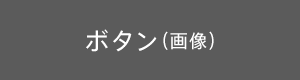
<style>
.page{position:relative;width:300px;height:80px;background:#5b5b5b}
.page>*{position:absolute;margin:0}
.t1{font:18px "AxisStd-Regular";letter-spacing:0.08em;color:#ffffff}
.t2{font:24px "AxisStd-Regular";letter-spacing:0.08em;color:#ffffff}
</style>
<div class="page">
<p class="t1" style="left:86px;top:29px;width:128px;height:23px"><span class="t2">ボタン</span>（画像）</p>
</div>
